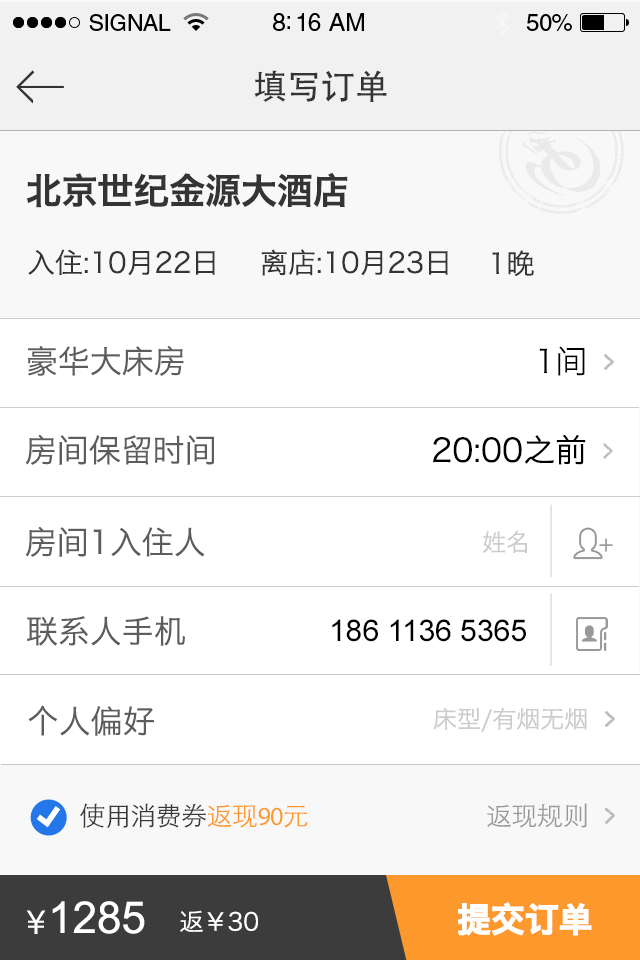
<style>
.page{position:relative;width:640px;height:960px;background:#ffffff}
.page>*{position:absolute;margin:0}
.t1{font:34px "STHeitiSC-Medium";color:#343434}
.t2{font:36px "HiraginoSansGB-W6";letter-spacing:-0.03em;color:#343434;font-weight:bold}
.t3{font:28px "HiraginoSansGB-W3";color:#343434}
.t4{font:32px "HiraginoSansGB-W3";color:#5d5d5d}
.t5{font:32px "HiraginoSansGB-W3";color:#000000}
.t6{font:24px "HiraginoSansGB-W3";color:#cccccc}
.t7{font:30px "ArialMT";color:#000000}
.t8{font:26px "STHeitiSC-Light";letter-spacing:-0.02em;color:#393939}
.t9{font:26px "STHeitiSC-Light";letter-spacing:-0.02em;color:#fc982c}
.t10{font:26px "MyriadPro-Regular";letter-spacing:-0.02em;color:#fc982c}
.t11{font:26px "STHeitiSC-Light";letter-spacing:-0.02em;color:#999999}
.t12{font:44px "ArialMT";color:#ffffff}
.t13{font:34px "HiraginoSansGB-W6";letter-spacing:-0.03em;color:#ffffff;font-weight:bold}
.t14{font:34px "STHeitiSC-Medium";color:#ffffff}
.t15{font:24px "HiraginoSansGB-W3";color:#ffffff}
</style>
<div class="page">
<p class="t1" style="left:254px;top:70px;width:133px;height:32px">填写订单</p>
<p class="t2" style="left:26px;top:172px;width:322px;height:36px">北京世纪金源大酒店</p>
<p class="t3" style="left:28px;top:249px;width:187px;height:27px">入住:10月22日</p>
<p class="t3" style="left:261px;top:249px;width:187px;height:27px">离店:10月23日</p>
<p class="t3" style="left:492px;top:250px;width:42px;height:26px">1晚</p>
<p class="t4" style="left:28px;top:345px;width:156px;height:31px">豪华大床房</p>
<p class="t5" style="left:539px;top:346px;width:46px;height:30px">1间</p>
<p class="t4" style="left:25px;top:434px;width:190px;height:31px">房间保留时间</p>
<p class="t5" style="left:433px;top:434px;width:153px;height:31px">20:00之前</p>
<p class="t4" style="left:25px;top:526px;width:180px;height:31px">房间1入住人</p>
<p class="t6" style="left:483px;top:530px;width:44px;height:23px">姓名</p>
<p class="t4" style="left:27px;top:616px;width:158px;height:30px">联系人手机</p>
<p class="t7" style="left:332px;top:619px;width:194px;height:23px">186 1136 5365</p>
<p class="t4" style="left:28px;top:705px;width:126px;height:31px">个人偏好</p>
<p class="t6" style="left:433px;top:707px;width:154px;height:25px">床型/有烟无烟</p>
<p class="t8" style="left:80px;top:803px;width:228px;height:25px">使用消费券<span class="t9">返现</span><span class="t10">90</span><span class="t9">元</span></p>
<p class="t11" style="left:487px;top:803px;width:100px;height:25px">返现规则</p>
<p class="t12" style="left:52px;top:901px;width:93px;height:33px">1285</p>
<p class="t13" style="left:457px;top:902px;width:135px;height:34px">提交订单</p>
<p class="t14" style="left:26px;top:910px;width:20px;height:24px">￥</p>
<p class="t15" style="left:180px;top:910px;width:78px;height:22px">返￥30</p>
</div>
